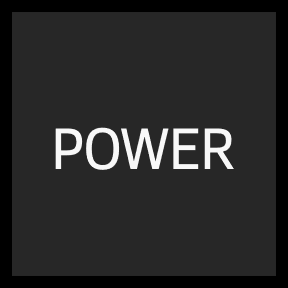
<style>
.page{position:relative;width:288px;height:288px;background:#272727}
.page>*{position:absolute;margin:0}
.t1{font:60px "ClearSans";letter-spacing:-0.04em;color:#ffffff}
</style>
<div class="page">
<p class="t1" style="left:55px;top:127px;width:179px;height:43px;opacity:0.97">POWER</p>
</div>
